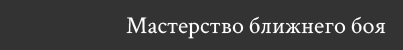
<style>
.page{position:relative;width:403px;height:50px;background:#333333}
.page>*{position:absolute;margin:0}
.t1{font:24px "CrimsonText-Regular";color:#ffffff}
</style>
<div class="page">
<p class="t1" style="left:126px;top:16px;width:260px;height:23px">Мастерство ближнего боя</p>
</div>
